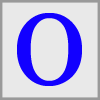
<style>
.page{position:relative;width:100px;height:100px;background:#e9e9e9}
.page>*{position:absolute;margin:0}
.t1{font:150px "Century";color:#1200ff}
</style>
<div class="page">
<p class="t1" style="left:17px;top:13px;width:65px;height:73px">o</p>
</div>
